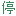
<style>
.page{position:relative;width:16px;height:16px;background:#ffffff}
.page>*{position:absolute;margin:0}
.t1{font:14px "NSimSun";color:#3d855f}
</style>
<div class="page">
<p class="t1" style="left:2px;top:1px;width:13px;height:13px">停</p>
</div>
